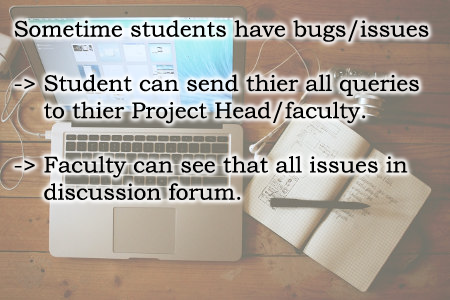
<style>
.page{position:relative;width:450px;height:300px}
.page>*{position:absolute;margin:0}
.t1{font:22.6px "BookmanOldStyle";color:#000000}
</style>
<div class="page">
<p class="t1" style="left:14px;top:20px;width:415px;height:180px">Sometime students have bugs/issues<br><br>-&gt; Student can send thier all queries <br>  to thier Project Head/faculty.<br><br>-&gt; Faculty can see that all issues in<br>  discussion forum.</p>
</div>
